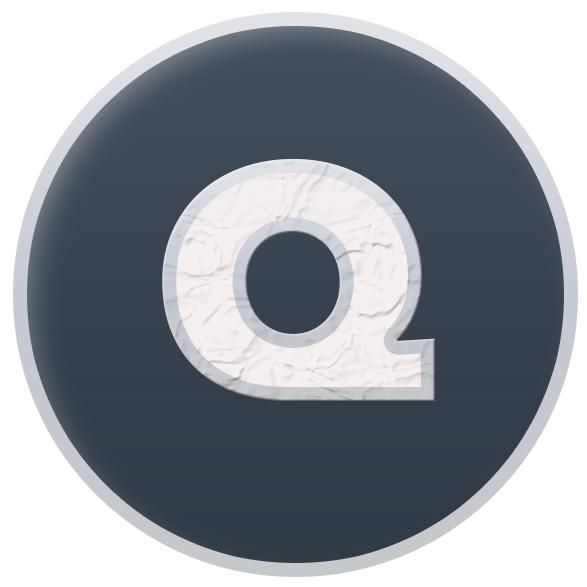
<style>
.page{position:relative;width:587px;height:587px;background:#ffffff}
.page>*{position:absolute;margin:0}
.t1{font:333px "AvenirNext-Heavy";letter-spacing:0.06em}
.t2{font:106px "AvenirNext-Heavy";letter-spacing:0.06em}
</style>
<div class="page">
<p class="t1" style="left:162px;top:159px;width:273px;height:242px"><span class="t2"><br><br><br><br><br><br><br><br><br><br><br></span>Q</p>
</div>
